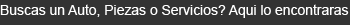
<style>
.page{position:relative;width:350px;height:25px;background:#333333}
.page>*{position:absolute;margin:0}
.t1{font:13.9px "ArialMT";color:#ffffff}
</style>
<div class="page">
<p class="t1" style="left:0px;top:4px;width:349px;height:14px">Buscas un Auto, Piezas o Servicios? Aqui lo encontraras</p>
</div>
